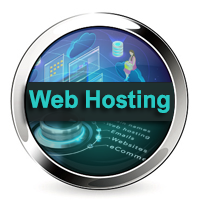
<style>
.page{position:relative;width:200px;height:200px;background:#ffffff}
.page>*{position:absolute;margin:0}
.t1{font:24.2px "ArialNova-Bold";color:#28c9c3}
</style>
<div class="page">
<p class="t1" style="left:29px;top:90px;width:141px;height:23px">Web Hosting</p>
</div>
